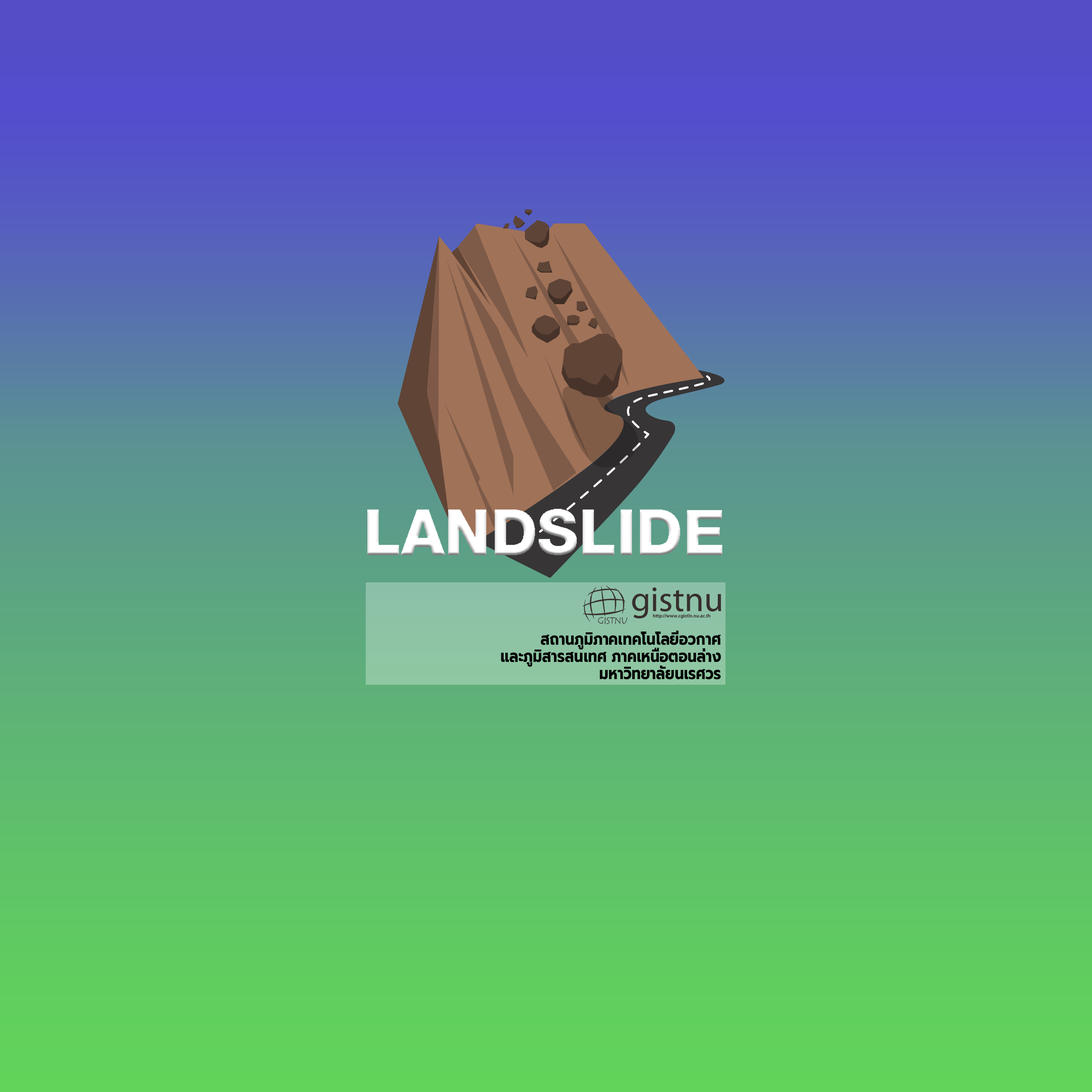
<style>
.page{position:relative;width:1092px;height:1092px}
.page>*{position:absolute;margin:0}
.t1{font:96.6px "PSLEmpireExtra";color:#ffffff}
.t2{font:17.3px "Prompt-Bold";color:#000000;scale:0.83 1}
</style>
<div class="page">
<p class="t1" style="left:367px;top:509px;width:355px;height:46px">LANDSLIDE</p>
<p class="t2" style="left:501px;top:630px;width:220px;height:49px;text-align:right">สถานภูมิภาคเทคโนโลยีอวกาศ<br>และภูมิสารสนเทศ ภาคเหนือตอนล่าง<br>มหาวิทยาลัยนเรศวร</p>
</div>
